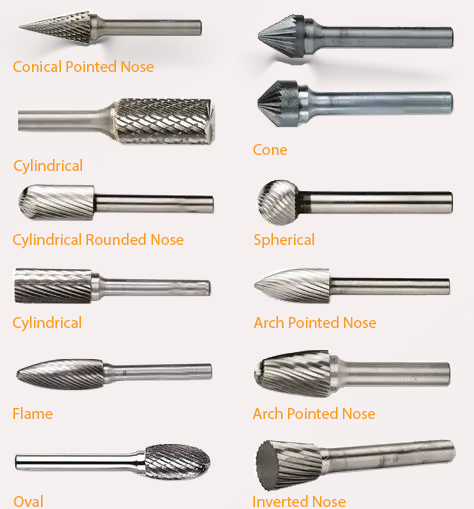
<style>
.page{position:relative;width:474px;height:509px;background:#f5efef}
.page>*{position:absolute;margin:0}
.t1{font:16px "MyriadPro-Regular";color:#f99d1c}
</style>
<div class="page">
<p class="t1" style="left:13px;top:60px;width:141px;height:12px">Conical Pointed Nose</p>
<p class="t1" style="left:253px;top:144px;width:34px;height:11px">Cone</p>
<p class="t1" style="left:14px;top:159px;width:68px;height:16px">Cylindrical</p>
<p class="t1" style="left:13px;top:233px;width:171px;height:16px">Cylindrical Rounded Nose</p>
<p class="t1" style="left:254px;top:233px;width:60px;height:15px">Spherical</p>
<p class="t1" style="left:13px;top:316px;width:68px;height:16px">Cylindrical</p>
<p class="t1" style="left:253px;top:316px;width:123px;height:12px">Arch Pointed Nose</p>
<p class="t1" style="left:13px;top:407px;width:40px;height:12px">Flame</p>
<p class="t1" style="left:252px;top:407px;width:123px;height:12px">Arch Pointed Nose</p>
<p class="t1" style="left:14px;top:495px;width:29px;height:12px">Oval</p>
<p class="t1" style="left:253px;top:495px;width:93px;height:12px">Inverted Nose</p>
</div>
